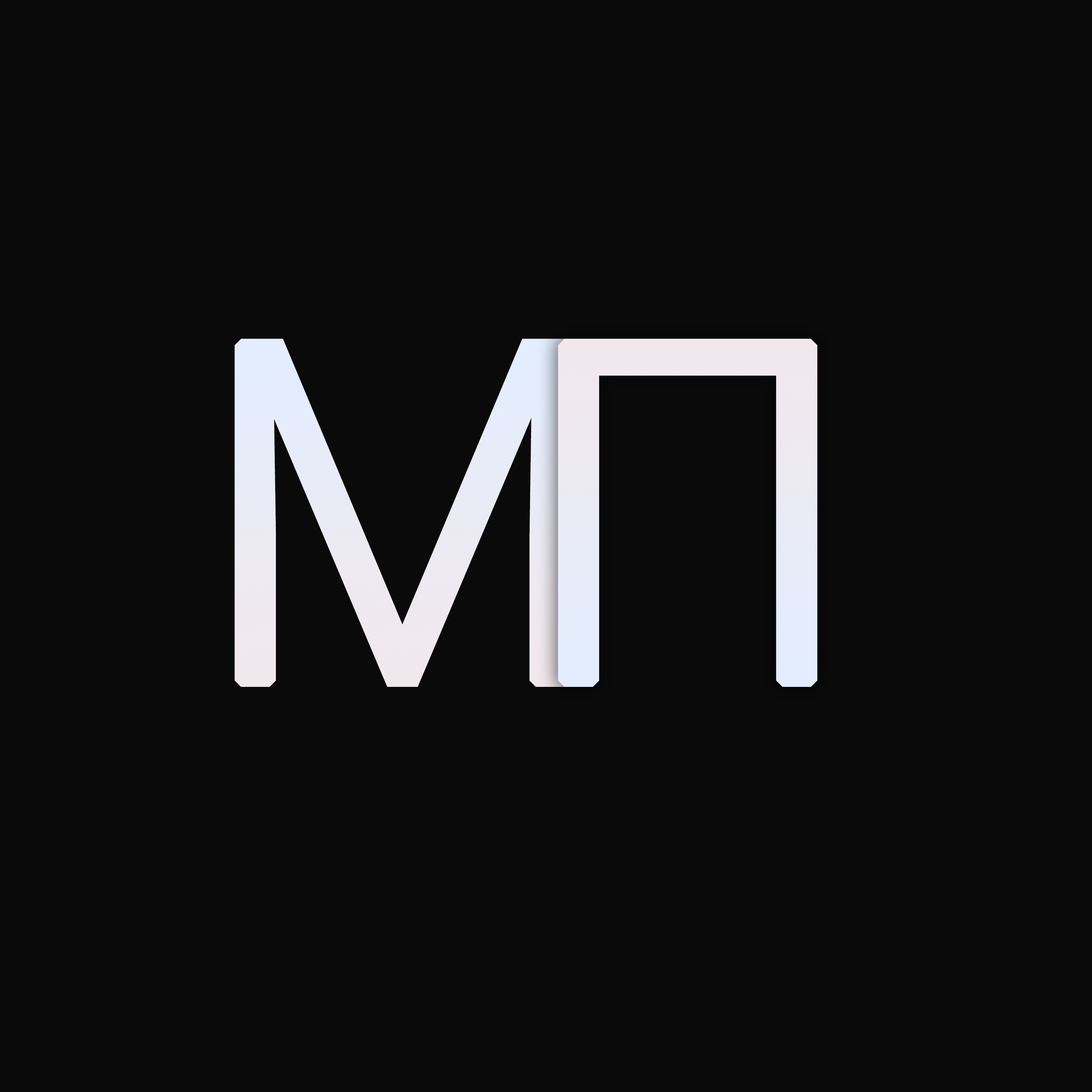
<style>
.page{position:relative;width:1092px;height:1092px;background:#0a0a0a}
.page>*{position:absolute;margin:0}
.t1{font:471.7px "Roboto-Light";color:#e9eaf3;font-weight:bold}
.t2{font:471.7px "Roboto-Light";color:#eceaf2;font-weight:bold}
</style>
<div class="page">
<p class="t1" style="left:234px;top:339px;width:337px;height:348px">М</p>
<p class="t2" style="left:558px;top:339px;width:260px;height:348px">П</p>
</div>
